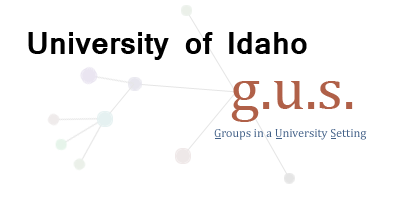
<style>
.page{position:relative;width:400px;height:200px;background:#ffffff}
.page>*{position:absolute;margin:0}
.t1{font:30px "Mangal-Bold";color:#000000}
.t2{font:60px "Cambria";color:#b06048}
.t3{font:12px "Cambria";color:#436188}
</style>
<div class="page">
<p class="t1" style="left:28px;top:32px;width:279px;height:28px">University of Idaho</p>
<p class="t2" style="left:231px;top:81px;width:122px;height:41px">g.u.s.</p>
<p class="t3" style="left:214px;top:129px;width:153px;height:11px">Groups in a University Setting</p>
</div>
